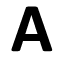
<style>
.page{position:relative;width:64px;height:64px;background:#ffffff}
.page>*{position:absolute;margin:0}
.t1{font:70px "Calibri-Bold";color:#000000}
</style>
<div class="page">
<p class="t1" style="left:11px;top:6px;width:42px;height:46px">A</p>
</div>
